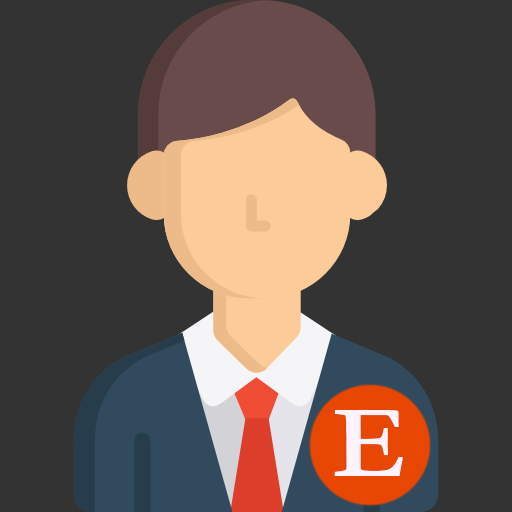
<style>
.page{position:relative;width:512px;height:512px;background:#333333}
.page>*{position:absolute;margin:0}
.t1{font:103.8px "Garamond-Bold";color:#fff3ff}
</style>
<div class="page">
<p class="t1" style="left:334px;top:410px;width:69px;height:66px">E</p>
</div>
